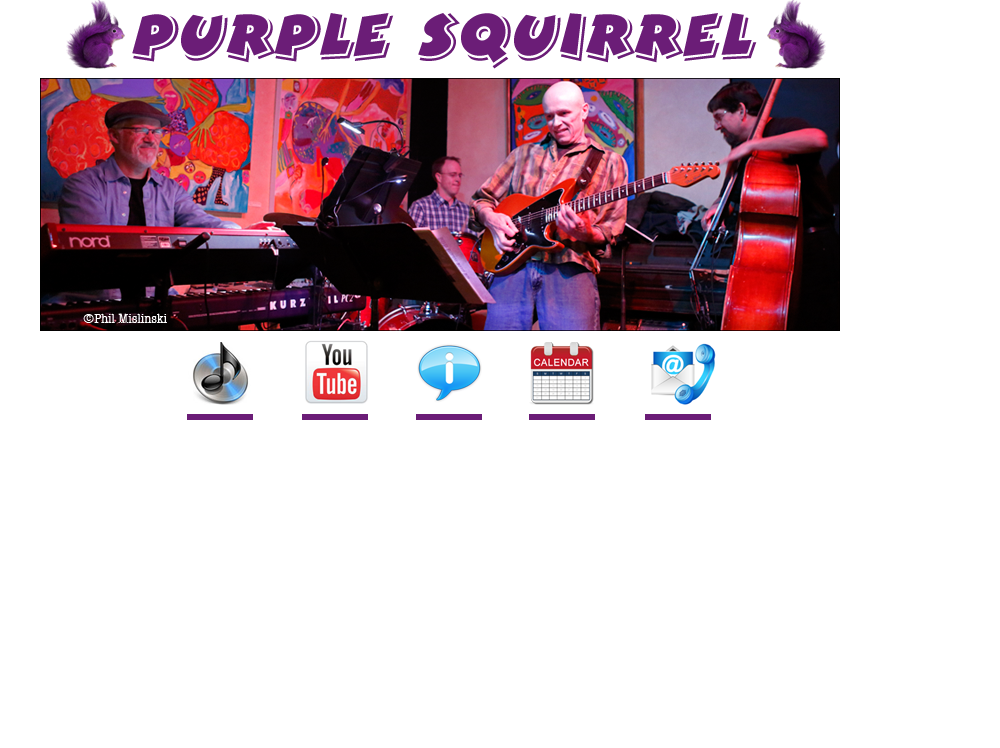
<style>
.page{position:relative;width:1000px;height:748px;background:#ffffff}
.page>*{position:absolute;margin:0}
.t1{font:72px "BertramLET";color:#6b1d77}
.t2{font:14px "AmericanTypewriter-Condensed";color:#ffffff}
</style>
<div class="page">
<p class="t1" style="left:132px;top:13px;width:625px;height:56px">Purple Squirrel</p>
<p class="t2" style="left:83px;top:313px;width:84px;height:10px">©Phil Mislinski</p>
</div>
